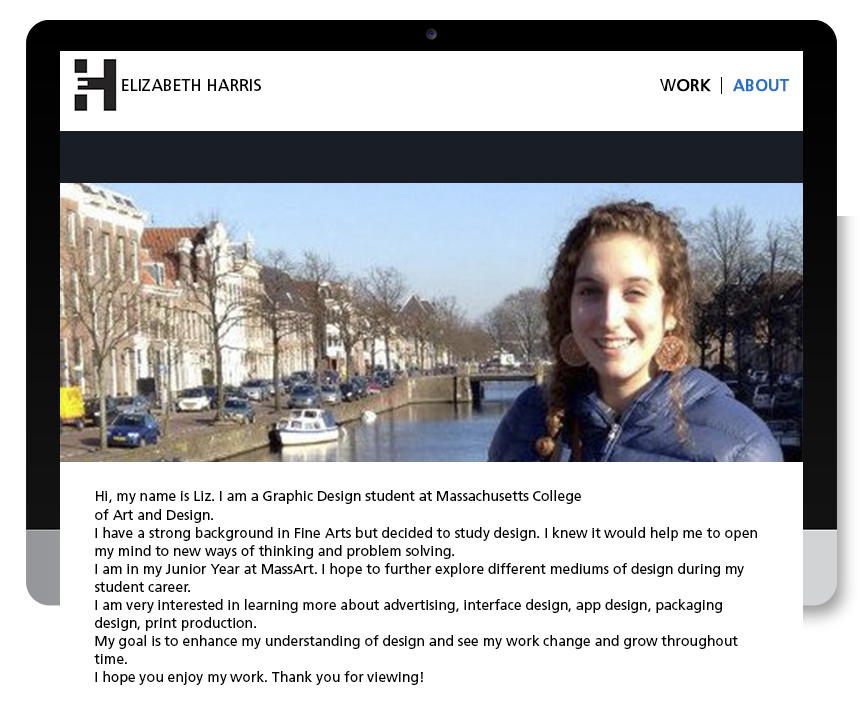
<style>
.page{position:relative;width:862px;height:719px;background:#ffffff}
.page>*{position:absolute;margin:0}
.t1{font:16px "Frutiger-Roman";color:#000000;text-transform:uppercase}
.t2{font:16px "Frutiger-Roman";color:#2670ca;text-transform:uppercase;font-weight:bold}
.t3{font:16px "Frutiger-Roman";color:#000000;text-transform:uppercase;font-weight:bold}
.t4{font:14px/18px "Frutiger-Roman";color:#000000}
</style>
<div class="page">
<p class="t1" style="left:122px;top:79px;width:139px;height:12px">Elizabeth Harris</p>
<p class="t2" style="left:660px;top:79px;width:129px;height:13px"><span class="t1">W</span><span class="t3">ork</span> about</p>
<p class="t4" style="left:94px;top:490px;width:663px;height:195px">Hi, my name is Liz. I am a Graphic Design student at Massachusetts College<br>of Art and Design.<br>I have a strong background in Fine Arts but decided to study design. I knew it would help me to open my mind to new ways of thinking and problem solving.<br>I am in my Junior Year at MassArt. I hope to further explore different mediums of design during my student career.<br>I am very interested in learning more about advertising, interface design, app design, packaging design, print production.<br>My goal is to enhance my understanding of design and see my work change and grow throughout time.<br>I hope you enjoy my work. Thank you for viewing!</p>
</div>
